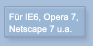
<style>
.page{position:relative;width:93px;height:46px;background:#9ab6d5}
.page>*{position:absolute;margin:0}
.t1{font:9px/12px "ArialMT";color:#ffffff}
</style>
<div class="page">
<p class="t1" style="left:9px;top:13px;width:69px;height:21px">Für IE6, Opera 7,<br>Netscape 7 u.a.</p>
</div>
